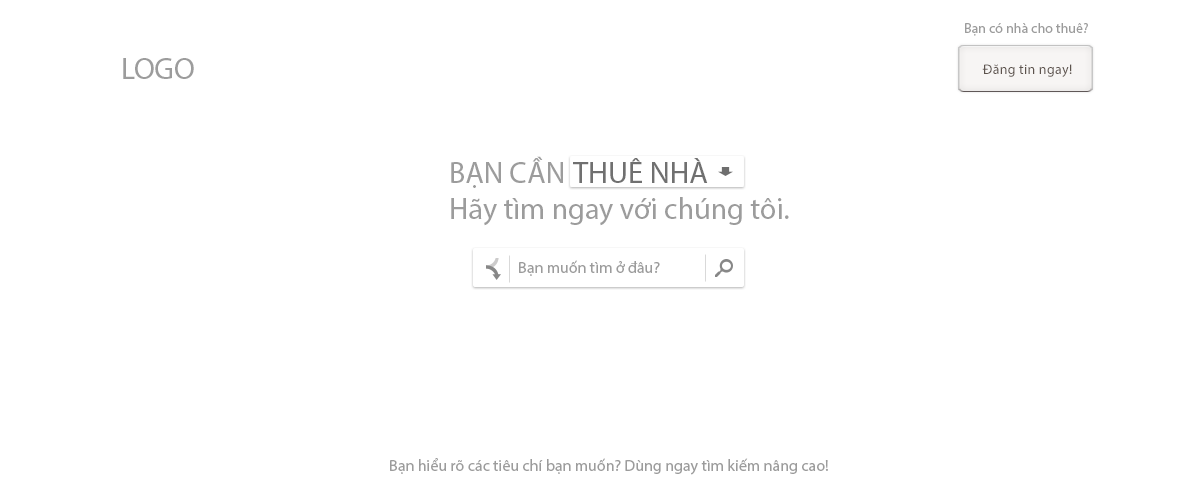
<style>
.page{position:relative;width:1200px;height:500px;background:#ffffff}
.page>*{position:absolute;margin:0}
.t1{font:14px "Tahoma";color:#9c9c9c}
.t2{font:30px "MyriadPro-Regular";color:#9c9c9c}
.t3{font:14px "MyriadPro-Regular";letter-spacing:0.02em;color:#5d534d}
.t4{font:30px "Tahoma";color:#9c9c9c}
.t5{font:30px "Tahoma";color:#707070}
.t6{font:16px "MyriadPro-Regular";color:#9c9c9c}
</style>
<div class="page">
<p class="t1" style="left:965px;top:23px;width:123px;height:13px">Bạn có nhà cho thuê?</p>
<p class="t2" style="left:123px;top:58px;width:71px;height:21px">LOGO</p>
<p class="t3" style="left:982px;top:64px;width:90px;height:13px">Đăng tin ngay!</p>
<p class="t4" style="left:451px;top:156px;width:338px;height:70px">BẠN CẦN <br>Hãy tìm ngay với chúng tôi.</p>
<p class="t5" style="left:573px;top:158px;width:135px;height:25px">THUÊ NHÀ</p>
<p class="t6" style="left:519px;top:260px;width:141px;height:16px">Bạn muốn tìm ở đâu?</p>
<p class="t6" style="left:390px;top:458px;width:438px;height:17px">Bạn hiểu rõ các tiêu chí bạn muốn? Dùng ngay tìm kiếm nâng cao!</p>
</div>
